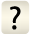
<style>
.page{position:relative;width:30px;height:35px}
.page>*{position:absolute;margin:0}
.t1{font:33px "MyriadPro-Regular";color:#000000}
</style>
<div class="page">
<p class="t1" style="left:10px;top:6px;width:11px;height:24px">?</p>
</div>
